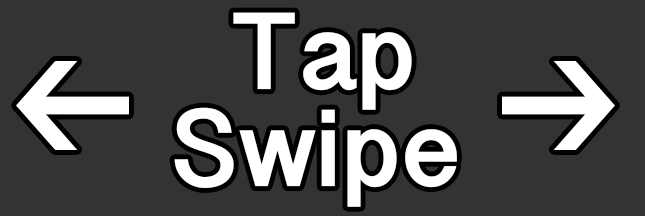
<style>
.page{position:relative;width:645px;height:216px;background:#333333}
.page>*{position:absolute;margin:0}
.t1{font:112.5px "SinhalaSangamMN-Bold";color:#ffffff}
</style>
<div class="page">
<p class="t1" style="left:233px;top:12px;width:179px;height:98px">Tap</p>
<p class="t1" style="left:174px;top:107px;width:283px;height:100px">Swipe</p>
</div>
